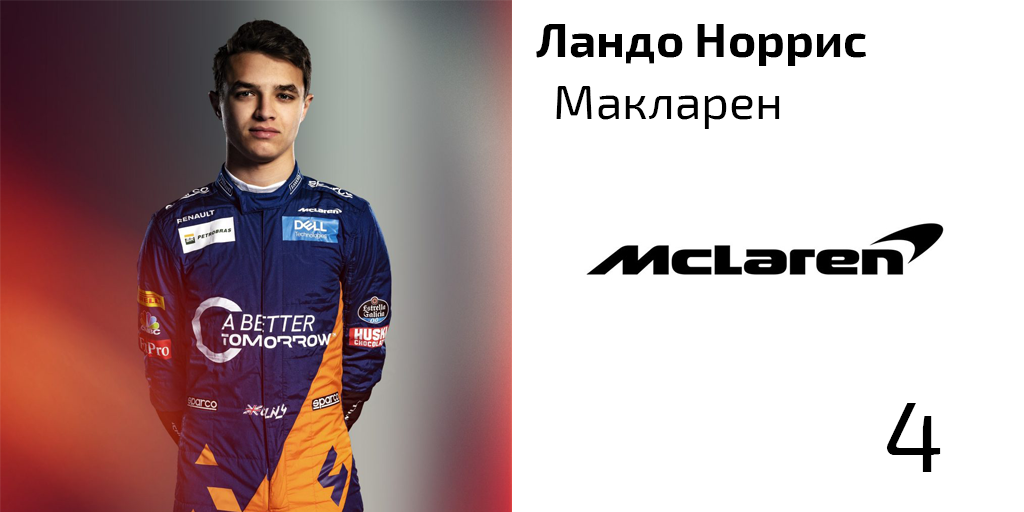
<style>
.page{position:relative;width:1024px;height:512px;background:#ffffff}
.page>*{position:absolute;margin:0}
.t1{font:48px "Exo2-Bold";color:#000000}
.t2{font:48px "Exo2-Regular";color:#000000}
.t3{font:100px "Exo2-Regular";color:#000000}
</style>
<div class="page">
<p class="t1" style="left:536px;top:24px;width:330px;height:42px">Ландо Норрис</p>
<p class="t2" style="left:556px;top:86px;width:224px;height:43px">Макларен</p>
<p class="t3" style="left:886px;top:403px;width:55px;height:69px">4</p>
</div>
